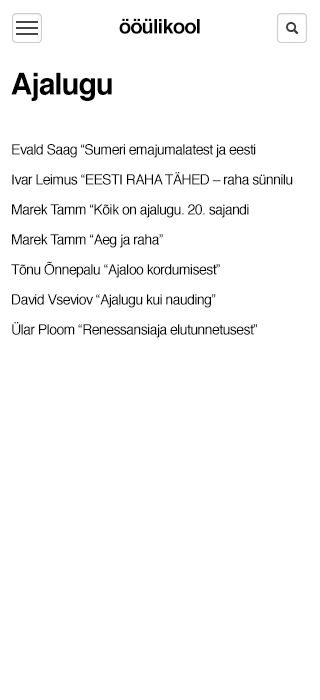
<style>
.page{position:relative;width:320px;height:700px;background:#ffffff}
.page>*{position:absolute;margin:0}
.t1{font:20px "Helvetica-Bold";letter-spacing:-0.04em;color:#000000}
.t2{font:14px/30px "Helvetica";letter-spacing:-0.04em;color:#000000}
.t3{font:30px/30px "Helvetica-Bold";letter-spacing:-0.04em;color:#000000}
</style>
<div class="page">
<p class="t1" style="left:119px;top:18px;width:81px;height:16px">ööülikool</p>
<p class="t2" style="left:11px;top:72px;width:282px;height:266px"><span class="t3">Ajalugu<br> </span><br>Evald Saag “Sumeri emajumalatest ja eesti <br>Ivar Leimus “EESTI RAHA TÄHED – raha sünnilu<br>Marek Tamm “Kõik on ajalugu. 20. sajandi <br>Marek Tamm “Aeg ja raha”<br>Tõnu Õnnepalu “Ajaloo kordumisest”<br>David Vseviov “Ajalugu kui nauding”<br>Ülar Ploom “Renessansiaja elutunnetusest”</p>
</div>
